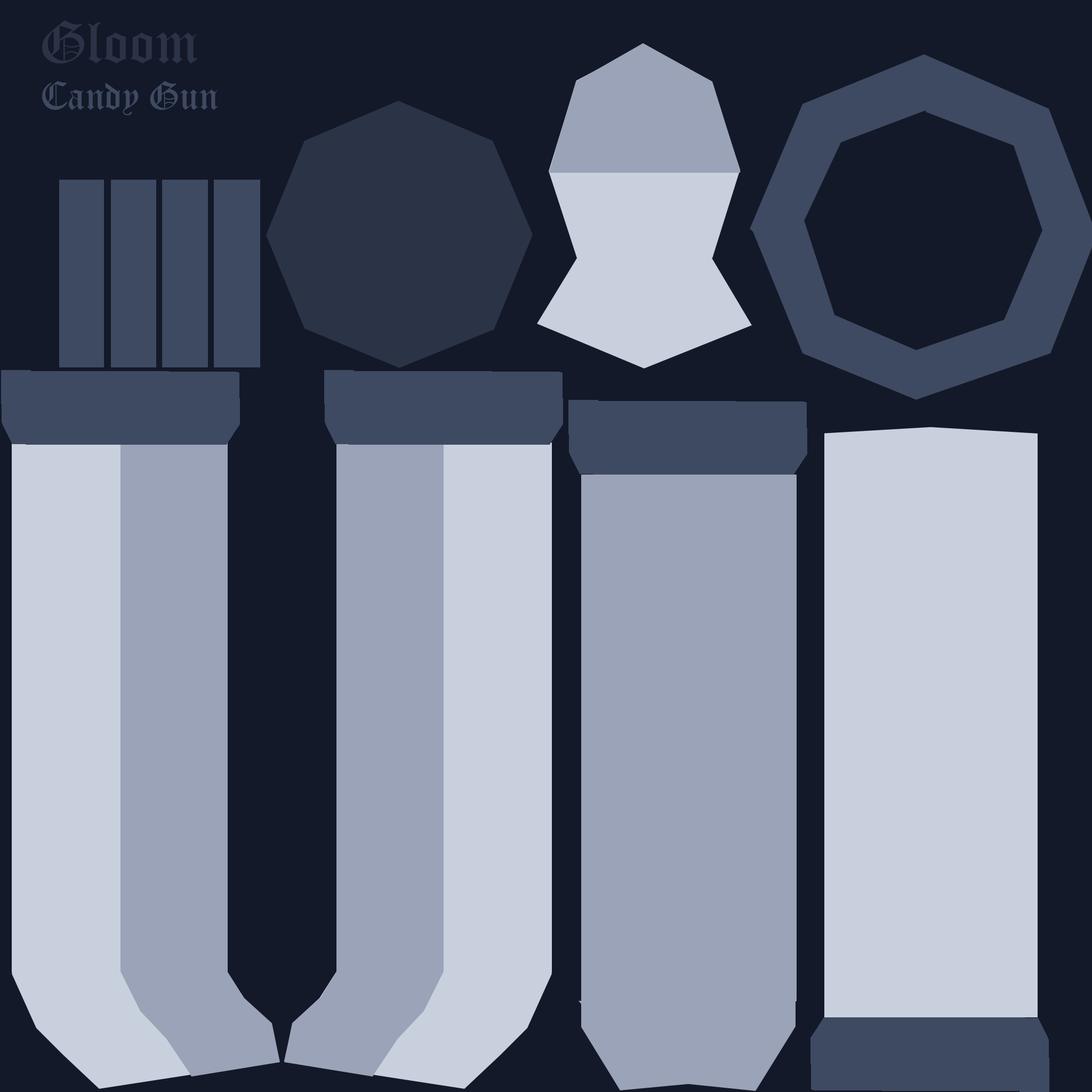
<style>
.page{position:relative;width:1092px;height:1092px;background:#131928}
.page>*{position:absolute;margin:0}
.t1{font:58.7px "OldEnglishTextMT";color:#2b3346}
.t2{font:38.4px "OldEnglishTextMT";color:#3e4a62}
</style>
<div class="page">
<p class="t1" style="left:42px;top:20px;width:156px;height:43px">Gloom</p>
<p class="t2" style="left:42px;top:81px;width:176px;height:34px">Candy Gun</p>
</div>
